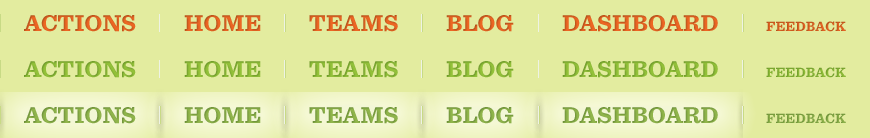
<style>
.page{position:relative;width:870px;height:138px;background:#e3ec9f}
.page>*{position:absolute;margin:0}
.t1{font:24px "Sentinel-Bold";color:#ed6623;text-transform:uppercase}
.t2{font:14px "Sentinel-Bold";color:#d05c1f;text-transform:uppercase}
.t3{font:24px "Sentinel-Bold";color:#93c139;text-transform:uppercase}
.t4{font:14px "Sentinel-Bold";color:#93c139;text-transform:uppercase}
.t5{font:24px "Sentinel-Bold";color:#90b54b;text-transform:uppercase}
.t6{font:14px "Sentinel-Bold";color:#90b54b;text-transform:uppercase}
</style>
<div class="page">
<p class="t1" style="left:24px;top:15px;width:112px;height:17px">actionS</p>
<p class="t1" style="left:184px;top:15px;width:77px;height:17px">Home</p>
<p class="t1" style="left:309px;top:15px;width:89px;height:17px">Teams</p>
<p class="t1" style="left:446px;top:15px;width:68px;height:17px">Blog</p>
<p class="t1" style="left:562px;top:15px;width:156px;height:17px">Dashboard</p>
<p class="t2" style="left:766px;top:21px;width:80px;height:11px">Feedback</p>
<p class="t3" style="left:24px;top:61px;width:112px;height:17px">actionS</p>
<p class="t3" style="left:184px;top:61px;width:77px;height:17px">Home</p>
<p class="t3" style="left:309px;top:61px;width:89px;height:17px">Teams</p>
<p class="t3" style="left:446px;top:61px;width:68px;height:17px">Blog</p>
<p class="t3" style="left:562px;top:61px;width:156px;height:17px">Dashboard</p>
<p class="t4" style="left:766px;top:67px;width:80px;height:11px">Feedback</p>
<p class="t5" style="left:24px;top:107px;width:112px;height:17px">actionS</p>
<p class="t5" style="left:184px;top:107px;width:77px;height:17px">Home</p>
<p class="t5" style="left:309px;top:107px;width:89px;height:17px">Teams</p>
<p class="t5" style="left:446px;top:107px;width:68px;height:17px">Blog</p>
<p class="t5" style="left:562px;top:107px;width:156px;height:17px">Dashboard</p>
<p class="t6" style="left:766px;top:113px;width:80px;height:11px">Feedback</p>
</div>
